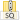
<style>
.page{position:relative;width:20px;height:20px;background:#ffffff}
.page>*{position:absolute;margin:0}
.t1{font:7px "SegoeUI";color:#62615e}
</style>
<div class="page">
<p class="t1" style="left:5px;top:12px;width:10px;height:7px">SQ</p>
</div>
